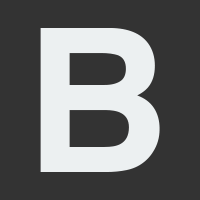
<style>
.page{position:relative;width:200px;height:200px;background:#333333}
.page>*{position:absolute;margin:0}
.t1{font:200px "Helvetica-Bold";letter-spacing:-0.05em;color:#ecf0f1}
</style>
<div class="page">
<p class="t1" style="left:40px;top:28px;width:120px;height:144px">B</p>
</div>
